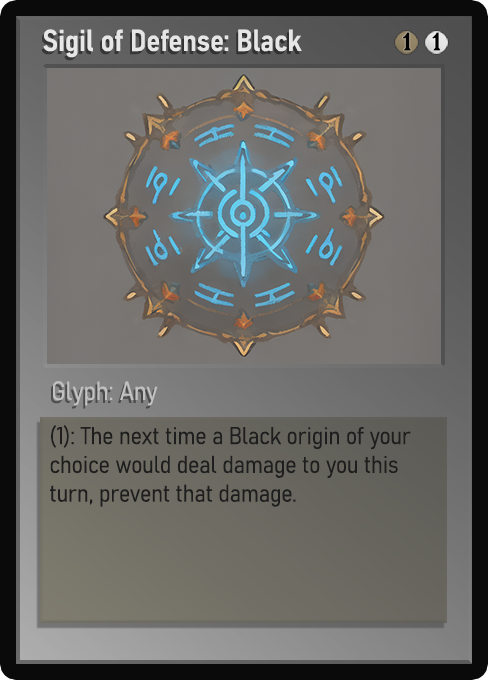
<style>
.page{position:relative;width:488px;height:680px}
.page>*{position:absolute;margin:0}
.t1{font:30px "Bahnschrift-SemiBoldSemiCondensed";color:#f2f2f2;font-weight:bold}
.t2{font:25px "WTRRoycroft";color:#000000;font-weight:bold;scale:1.09 1}
.t3{font:26px "Bahnschrift-LightSemiCondensed";color:#c8c8c8;font-weight:bold}
.t4{font:24px "Bahnschrift-LightSemiCondensed";color:#1e1e1e;font-weight:bold}
</style>
<div class="page">
<p class="t1" style="left:43px;top:29px;width:259px;height:29px;opacity:0.9">Sigil of Defense: Black</p>
<p class="t2" style="left:403px;top:32px;width:8px;height:19px">1</p>
<p class="t2" style="left:432px;top:32px;width:9px;height:19px">1</p>
<p class="t3" style="left:53px;top:381px;width:105px;height:25px;opacity:0.9">Glyph: Any</p>
<p class="t4" style="left:50px;top:425px;width:361px;height:82px">(1): The next time a Black origin of your choice would deal damage to you this turn, prevent that damage.</p>
</div>
